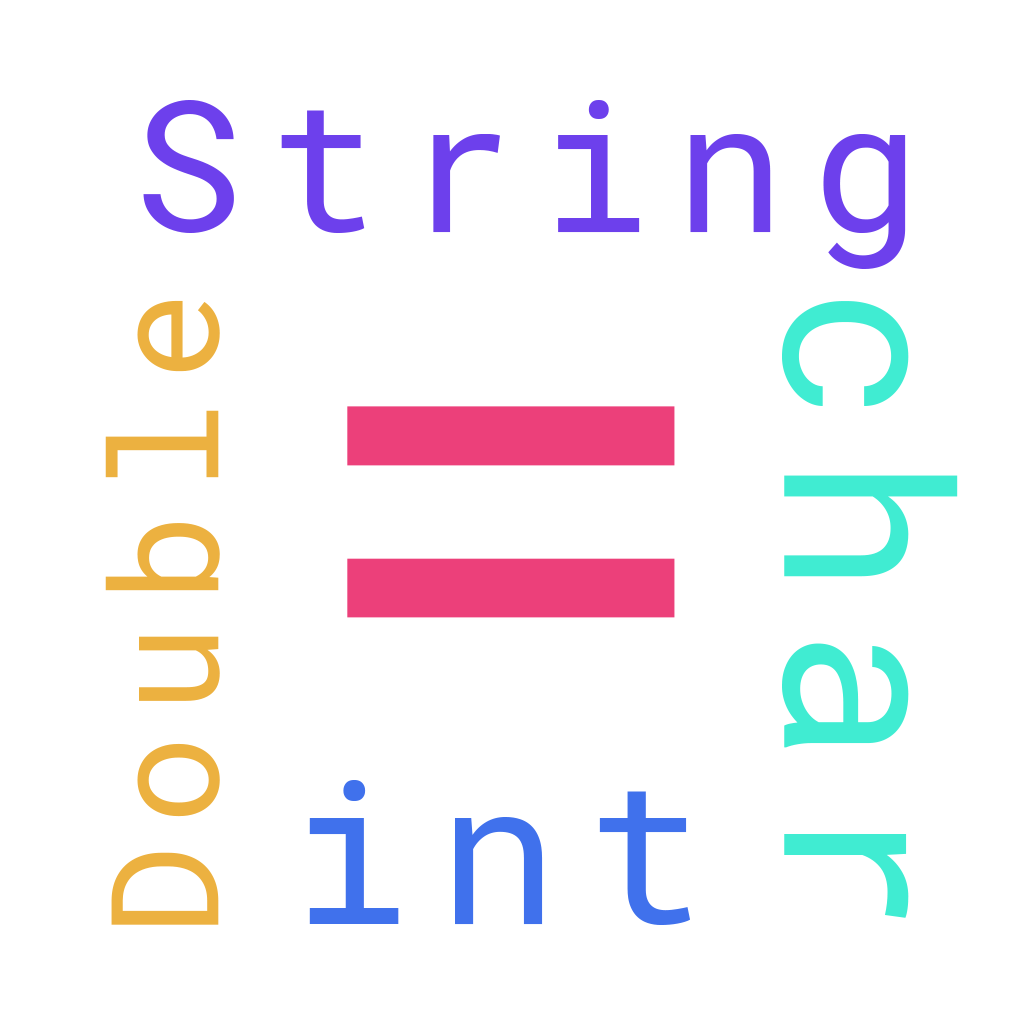
<style>
.page{position:relative;width:1024px;height:1024px;background:#ffffff}
.page>*{position:absolute;margin:0}
.t1{font:183.1px "RobotoMono-Regular";letter-spacing:0.14em;color:#6d40ec}
.t2{font:150px "RobotoMono-Regular";letter-spacing:0.14em;color:#ecb140}
.t3{font:230.5px "RobotoMono-Regular";letter-spacing:0.14em;color:#40ecd2}
.t4{font:750px "RobotoMono-Regular";letter-spacing:0.14em;color:#ec407a}
.t5{font:200px "RobotoMono-Regular";letter-spacing:0.14em;color:#4071ec}
</style>
<div class="page">
<p class="t1" style="left:143px;top:100px;width:763px;height:169px">String</p>
<p class="t2" style="left:105px;top:300px;width:115px;height:625px;rotate:-90deg">Double</p>
<p class="t3" style="left:782px;top:301px;width:176px;height:617px;rotate:90deg">char</p>
<p class="t4" style="left:347px;top:406px;width:328px;height:212px">=</p>
<p class="t5" style="left:309px;top:780px;width:381px;height:145px">int</p>
</div>
